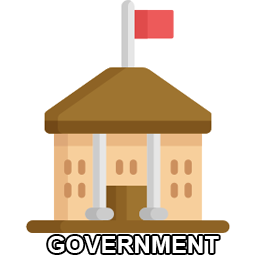
<style>
.page{position:relative;width:256px;height:256px;background:#ffffff}
.page>*{position:absolute;margin:0}
.t1{font:24px "Arial-BoldMT";color:#ffffff}
</style>
<div class="page">
<p class="t1" style="left:48px;top:236px;width:171px;height:17px">GOVERNMENT</p>
</div>
